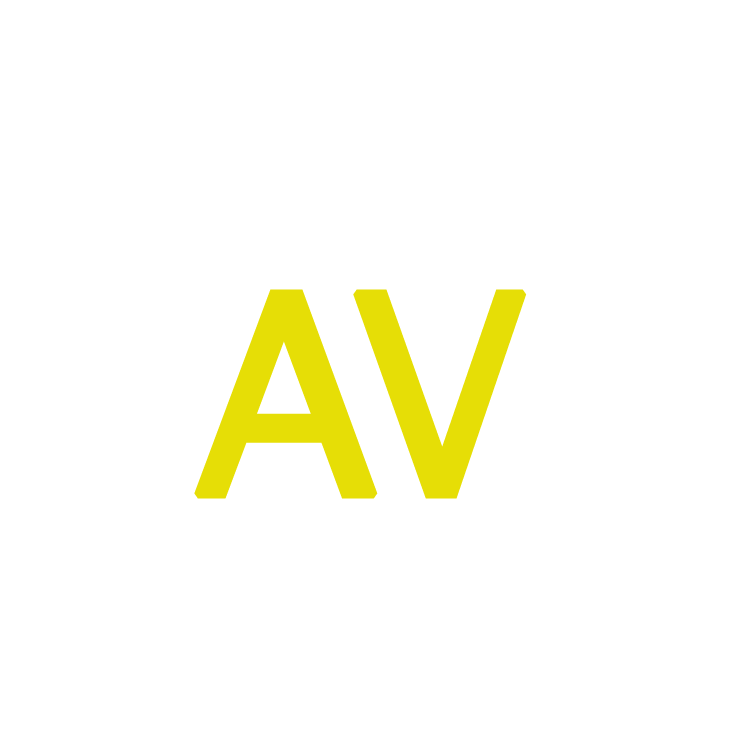
<style>
.page{position:relative;width:752px;height:752px;background:#ffffff}
.page>*{position:absolute;margin:0}
.t1{font:278.7px "LucidaSansUnicode";letter-spacing:-0.12em;color:#e6de06;font-weight:bold;scale:0.94 1}
</style>
<div class="page">
<p class="t1" style="left:194px;top:289px;width:333px;height:210px">AV</p>
</div>
